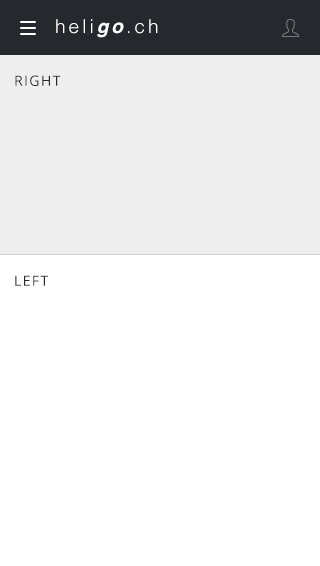
<style>
.page{position:relative;width:320px;height:566px;background:#ffffff}
.page>*{position:absolute;margin:0}
.t1{font:19px "Helvetica-Light";letter-spacing:0.16em;color:#ffffff}
.t2{font:19px "Helvetica-BoldOblique";letter-spacing:0.16em;color:#ffffff}
.t3{font:14px "OpenSans";letter-spacing:0.1em;color:#27282d;text-transform:uppercase}
</style>
<div class="page">
<p class="t1" style="left:56px;top:19px;width:102px;height:19px">heli<span class="t2">go</span>.ch</p>
<p class="t3" style="left:15px;top:75px;width:46px;height:11px">RIGHT</p>
<p class="t3" style="left:15px;top:275px;width:33px;height:11px">left</p>
</div>
